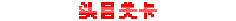
<style>
.page{position:relative;width:236px;height:21px;background:#ffffff}
.page>*{position:absolute;margin:0}
.t1{font:18.7px "DinkieBitmap-7pxDemo";font-weight:bold}
</style>
<div class="page">
<p class="t1" style="left:79px;top:2px;width:78px;height:17px">头目关卡</p>
</div>
